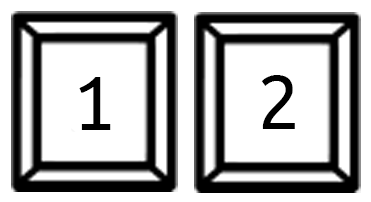
<style>
.page{position:relative;width:371px;height:202px;background:#ffffff}
.page>*{position:absolute;margin:0}
.t1{font:12px "UbuntuMono-Regular";color:#000000}
</style>
<div class="page">
<p class="t1" style="left:79px;top:77px;width:32px;height:53px">1</p>
<p class="t1" style="left:261px;top:75px;width:34px;height:54px">2</p>
</div>
